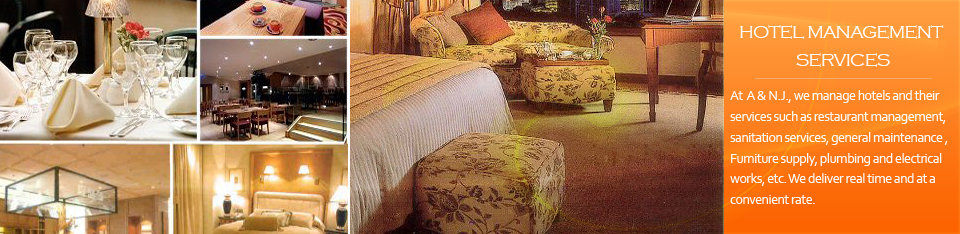
<style>
.page{position:relative;width:960px;height:234px}
.page>*{position:absolute;margin:0}
.t1{font:18px/6.9px "CopperplateGothic-Light";letter-spacing:-0.04em;color:#fcfbfa}
.t2{font:14px/6.9px "Corbel";letter-spacing:-0.04em;color:#fcfbfa}
</style>
<div class="page">
<p class="t1" style="left:740px;top:25px;width:204px;height:42px;text-align:center">HOTEL MANAGEMENT <br><br><br><br>SERVICES</p>
<p class="t2" style="left:730px;top:90px;width:218px;height:114px">At  A &amp; N.J., we manage hotels and their <br><br><br>services such as restaurant management,<br><br><br>sanitation services, general maintenance ,<br><br><br>Furniture supply, plumbing and electrical <br><br><br>works, etc. We deliver real time and at a <br><br><br>convenient rate.</p>
</div>
